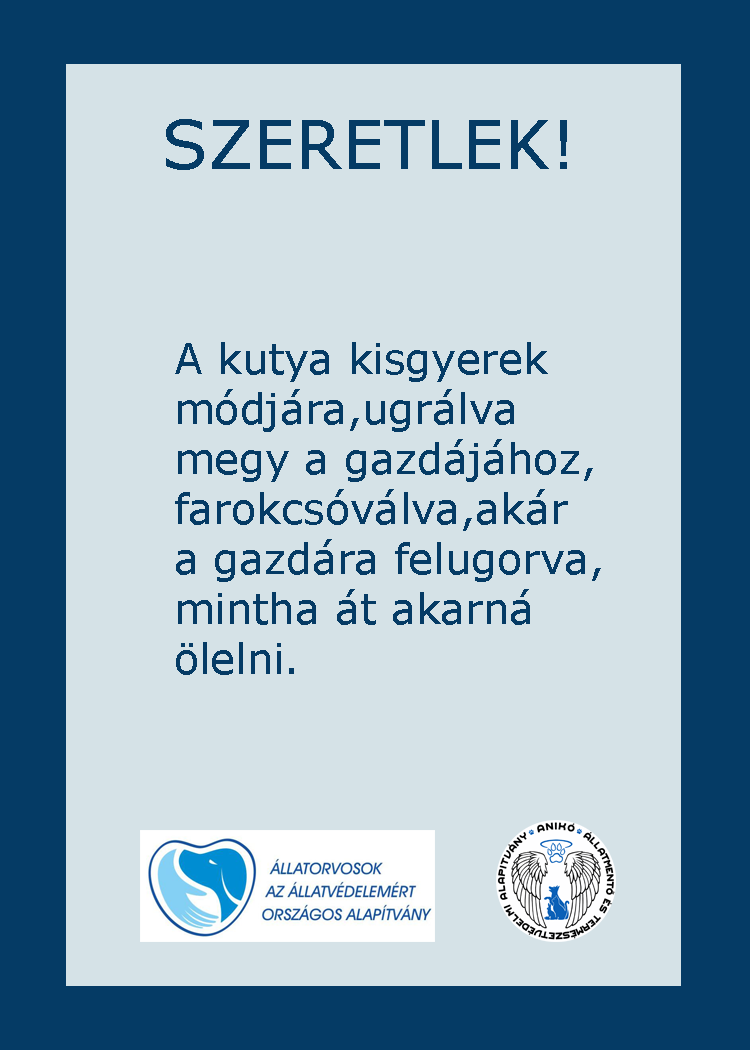
<style>
.page{position:relative;width:750px;height:1050px;background:#d5e2e7}
.page>*{position:absolute;margin:0}
.t1{font:66.7px "Verdana";color:#053b65}
.t2{font:66.7px "GravitateBRK";color:#053b65}
.t3{font:41.7px "Verdana";color:#053b65}
</style>
<div class="page">
<p class="t1" style="left:166px;top:119px;width:401px;height:51px"><span class="t2">         </span>SZERETLEK!</p>
<p class="t3" style="left:175px;top:342px;width:426px;height:333px">A kutya kisgyerek<br>módjára,ugrálva<br>megy a gazdájához,<br>farokcsóválva,akár<br>a gazdára felugorva,<br>mintha át akarná<br>ölelni.</p>
</div>
